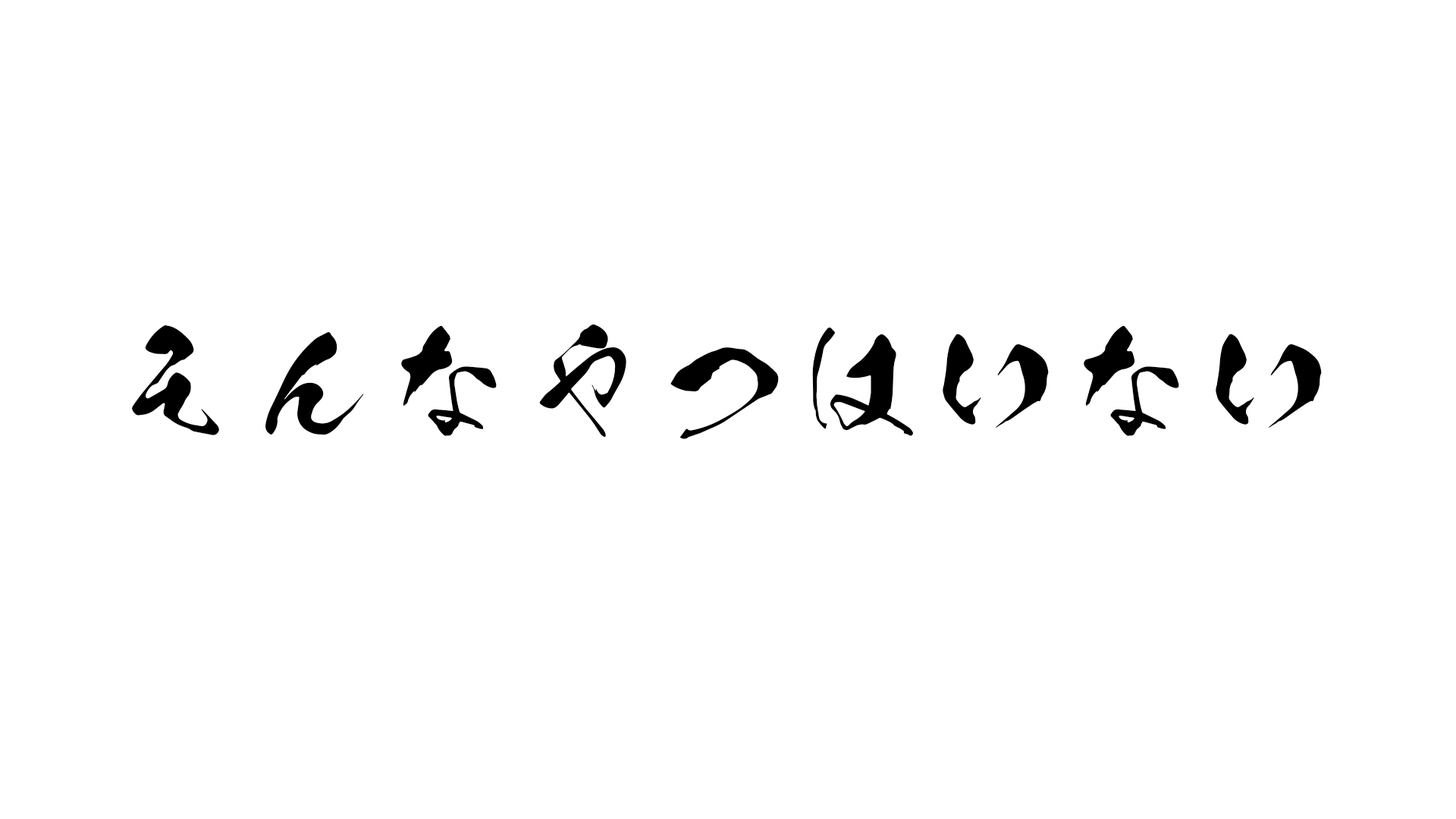
<style>
.page{position:relative;width:1456px;height:819px;background:#ffffff}
.page>*{position:absolute;margin:0}
.t1{font:136.5px "KsoKokuryuSou";color:#000000}
</style>
<div class="page">
<p class="t1" style="left:132px;top:324px;width:1190px;height:115px">そんなやつはいない</p>
</div>
